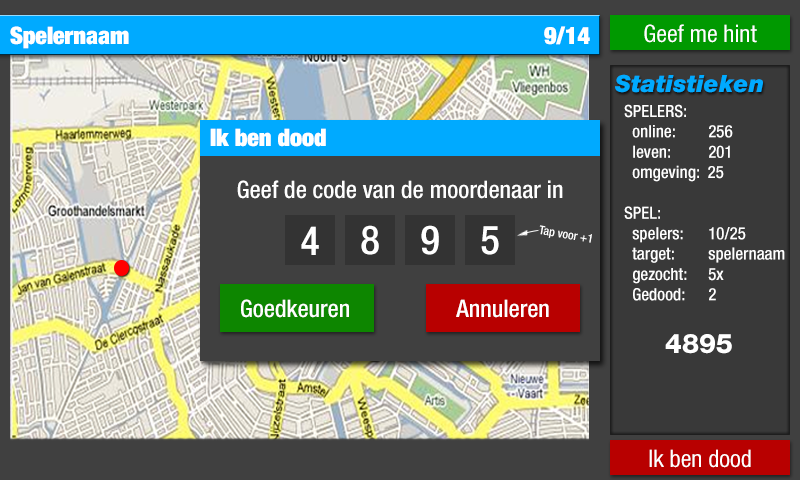
<style>
.page{position:relative;width:800px;height:480px;background:#404040}
.page>*{position:absolute;margin:0}
.t1{font:24px "HelveticaNeueLTStd-XBlkCn";color:#ffffff}
.t2{font:24px "HelveticaNeueLTStd-Cn";color:#ffffff}
.t3{font:24px "HelveticaNeueLTStd-BlkIt";color:#00aaff}
.t4{font:17px "HelveticaNeueLTStd-MdCn";color:#ffffff}
.t5{font:17px "HelveticaNeueLTStd-MdCn";color:#ffffff;text-transform:uppercase}
.t6{font:27px "HelveticaNeueLTStd-Hv";color:#ffffff}
.t7{font:24px "HelveticaNeueLTStd-MdCn";color:#ffffff}
.t8{font:40px "HelveticaNeueLTStd-MdCn";color:#ffffff}
.t9{font:12px "HelveticaNeueLTStd-MdCn";color:#ffffff}
</style>
<div class="page">
<p class="t1" style="left:10px;top:26px;width:119px;height:23px">Spelernaam</p>
<p class="t1" style="left:544px;top:26px;width:46px;height:19px">9/14</p>
<p class="t2" style="left:644px;top:24px;width:113px;height:19px">Geef me hint</p>
<p class="t3" style="left:615px;top:74px;width:148px;height:19px">Statistieken</p>
<p class="t4" style="left:624px;top:104px;width:161px;height:250px"><span class="t5">Spelers:<br></span>  online:     256<br>  leven:     201<br>  omgeving:  25<br><br><span class="t5">Spel:<br> </span> spelers:    10/25<br>  target:     spelernaam<br>  gezocht:    5x<br>  Gedood:    2<br><br><span class="t6">4895</span></p>
<p class="t1" style="left:210px;top:128px;width:116px;height:19px">Ik ben dood</p>
<p class="t7" style="left:237px;top:180px;width:326px;height:19px">Geef de code van de moordenaar in</p>
<p class="t8" style="left:301px;top:226px;width:18px;height:29px">4</p>
<p class="t8" style="left:361px;top:225px;width:18px;height:30px">8</p>
<p class="t8" style="left:421px;top:225px;width:18px;height:30px">9</p>
<p class="t8" style="left:481px;top:226px;width:18px;height:29px">5</p>
<p class="t9" style="left:539px;top:225px;width:53px;height:18px;rotate:10deg">Tap voor +1</p>
<p class="t7" style="left:241px;top:299px;width:108px;height:19px">Goedkeuren</p>
<p class="t7" style="left:456px;top:299px;width:93px;height:19px">Annuleren</p>
<p class="t2" style="left:649px;top:449px;width:102px;height:19px">Ik ben dood</p>
</div>
